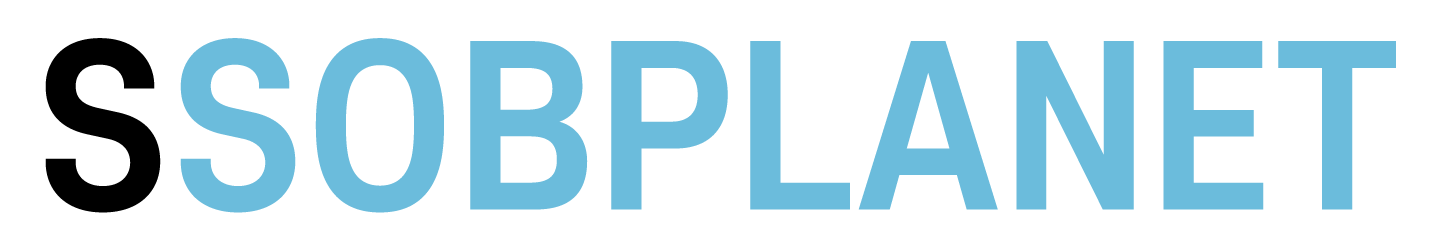
<style>
.page{position:relative;width:1440px;height:252px;background:#ffffff}
.page>*{position:absolute;margin:0}
.t1{font:212.6px "S-CoreDream-6Bold";letter-spacing:0.02em;color:#6bbcdc;scale:0.96 1}
.t2{font:212.6px "S-CoreDream-6Bold";letter-spacing:0.02em;color:#000000;scale:0.96 1}
</style>
<div class="page">
<p class="t1" style="left:45px;top:38px;width:1351px;height:175px"><span class="t2">S</span>SOBPLANET</p>
</div>
